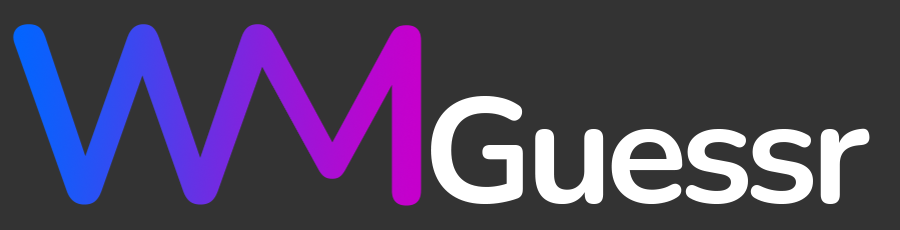
<style>
.page{position:relative;width:900px;height:230px;background:#333333}
.page>*{position:absolute;margin:0}
.t1{font:150px "Nunito-Bold";letter-spacing:-0.05em;color:#ffffff}
</style>
<div class="page">
<p class="t1" style="left:431px;top:96px;width:439px;height:108px">Guessr</p>
</div>
